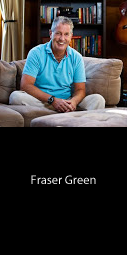
<style>
.page{position:relative;width:127px;height:255px;background:#000000}
.page>*{position:absolute;margin:0}
.t1{font:12.5px "MyriadPro-Regular";color:#ffffff}
</style>
<div class="page">
<p class="t1" style="left:31px;top:175px;width:65px;height:9px">Fraser Green</p>
</div>
